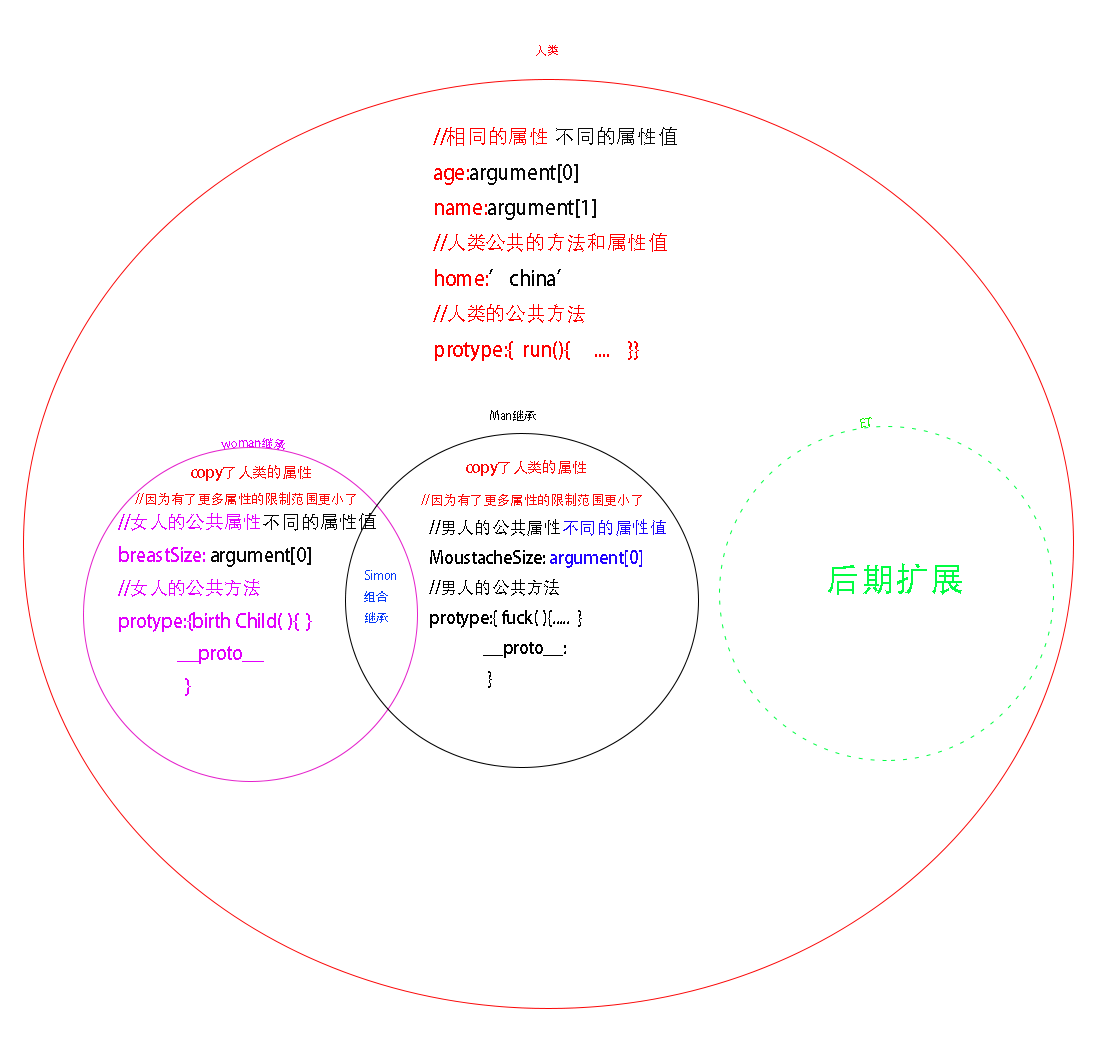
<style>
.page{position:relative;width:1117px;height:1052px;background:#ffffff}
.page>*{position:absolute;margin:0}
.t1{font:12px "AdobeHeitiStd-Regular";color:#fd020e}
.t2{font:20.2px "AdobeHeitiStd-Regular";color:#fd0000}
.t3{font:20.2px "AdobeHeitiStd-Regular";color:#090909}
.t4{font:20.2px "AdobeHeitiStd-Regular";color:#030303}
.t5{font:12px "AdobeHeitiStd-Regular";color:#000000}
.t6{font:12px "AdobeHeitiStd-Regular";color:#15f204}
.t7{font:12px "AdobeHeitiStd-Regular";color:#e200fd}
.t8{font:15.2px "AdobeHeitiStd-Regular";color:#f90a0a}
.t9{font:13.3px "AdobeHeitiStd-Regular";color:#f90a0a}
.t10{font:18.8px "AdobeHeitiStd-Regular";color:#e200fd}
.t11{font:18.8px "AdobeHeitiStd-Regular";color:#050505}
.t12{font:18.8px "AdobeHeitiStd-Regular";color:#090909}
.t13{font:17.3px "AdobeHeitiStd-Regular";color:#000000}
.t14{font:17.3px "AdobeHeitiStd-Regular";color:#1c05f9}
.t15{font:17.3px "AdobeHeitiStd-Regular";color:#2103fe}
.t16{font:33.8px "AdobeHeitiStd-Regular";color:#02fd43}
.t17{font:12px "AdobeHeitiStd-Regular";color:#0639f7}
</style>
<div class="page">
<p class="t1" style="left:536px;top:45px;width:22px;height:11px">人类</p>
<p class="t2" style="left:433px;top:127px;width:244px;height:234px">//相同的属性 <span class="t3">不同的属性值<br></span>age:<span class="t3">argument[0]  <br></span>name:<span class="t3">argument[1]<br></span>//人类公共的方法和属性值<br>home:<span class="t4">’china’<br></span>//人类的公共方法 <br>protype:{  run(){     ....    }}</p>
<p class="t5" style="left:490px;top:410px;width:46px;height:11px">Man继承</p>
<p class="t6" style="left:860px;top:417px;width:12px;height:11px">ET</p>
<p class="t7" style="left:221px;top:438px;width:64px;height:12px">woman继承</p>
<p class="t8" style="left:466px;top:460px;width:120px;height:16px">copy了人类的属性</p>
<p class="t8" style="left:191px;top:465px;width:120px;height:16px">copy了人类的属性</p>
<p class="t9" style="left:135px;top:492px;width:221px;height:13px">//因为有了更多属性的限制范围更小了</p>
<p class="t9" style="left:421px;top:493px;width:221px;height:13px">//因为有了更多属性的限制范围更小了</p>
<p class="t10" style="left:118px;top:513px;width:258px;height:183px">//女人的公共属性<span class="t11">不同的属性值<br></span>breastSize:<span class="t12"> argument[0]<br></span>//女人的公共方法<br>protype:{birth Child( ){  }<br>              __proto__<br>                }</p>
<p class="t13" style="left:429px;top:519px;width:237px;height:169px">//男人的公共属性<span class="t14">不同的属性值<br></span>MoustacheSize: <span class="t15">argument[0]<br></span>//男人的公共方法<br>protype:{ fuck( ){.....  }<br>              __proto__:<br>               }</p>
<p class="t16" style="left:828px;top:563px;width:134px;height:32px">后期扩展</p>
<p class="t17" style="left:364px;top:570px;width:32px;height:53px">Simon<br>组合<br>继承</p>
</div>
